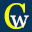
<style>
.page{position:relative;width:32px;height:32px;background:#07345a}
.page>*{position:absolute;margin:0}
.t1{font:36px "Georgia";color:#f3fc03}
.t2{font:24px "Georgia";color:#faf6f6}
</style>
<div class="page">
<p class="t1" style="left:4px;top:3px;width:22px;height:26px">C</p>
<p class="t2" style="left:10px;top:15px;width:19px;height:13px">w</p>
</div>
